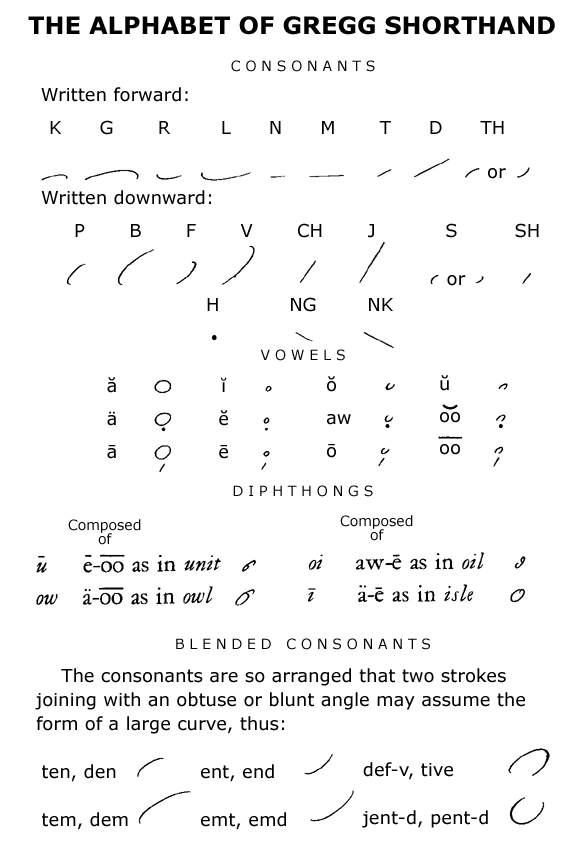
<style>
.page{position:relative;width:583px;height:857px;background:#ffffff}
.page>*{position:absolute;margin:0}
.t1{font:24px "Verdana-Bold";color:#000000}
.t2{font:14px/17px "Verdana";letter-spacing:0.35em;color:#000000}
.t3{font:18px "Verdana";color:#000000}
.t4{font:18px/33px "Verdana";color:#000000}
.t5{font:18px/32px "Verdana";color:#000000}
.t6{font:14px/14px "Verdana";color:#000000}
.t7{font:18px/24px "Verdana";color:#000000}
</style>
<div class="page">
<p class="t1" style="left:28px;top:16px;width:527px;height:19px">THE ALPHABET OF GREGG SHORTHAND</p>
<p class="t2" style="left:176px;top:60px;width:254px;height:590px;text-align:center">CONSONANTS<br><br><br><br><br><br><br><br><br><br><br><br><br><br><br><br><br>VOWELS<br><br><br><br><br><br><br><br>DIPHTHONGS<br><br><br><br><br><br><br><br><br>BLENDED CONSONANTS</p>
<p class="t3" style="left:41px;top:87px;width:147px;height:15px">Written forward:</p>
<p class="t3" style="left:50px;top:120px;width:454px;height:15px">K      G       R        L      N      M       T      D      TH</p>
<p class="t3" style="left:488px;top:168px;width:18px;height:11px">or</p>
<p class="t3" style="left:41px;top:190px;width:170px;height:15px">Written downward:</p>
<p class="t3" style="left:75px;top:223px;width:464px;height:15px">P       B       F       V       CH       J           S         SH</p>
<p class="t3" style="left:447px;top:275px;width:19px;height:11px">or</p>
<p class="t3" style="left:207px;top:297px;width:186px;height:15px">H           NG        NK</p>
<p class="t4" style="left:107px;top:377px;width:9px;height:82px">ă<br>ä<br>ā</p>
<p class="t4" style="left:219px;top:377px;width:9px;height:82px;text-align:center">ĭ<br>ĕ<br>ē</p>
<p class="t4" style="left:327px;top:376px;width:24px;height:82px">ŏ<br>aw<br>ō</p>
<p class="t5" style="left:440px;top:375px;width:20px;height:80px">ŭ<br>oo<br>oo</p>
<p class="t6" style="left:68px;top:519px;width:73px;height:26px;text-align:center">Composed<br>of</p>
<p class="t6" style="left:340px;top:515px;width:73px;height:26px;text-align:center">Composed<br>of</p>
<p class="t7" style="left:35px;top:668px;width:490px;height:66px">The consonants are so arranged that two strokes<br>joining with an obtuse or blunt angle may assume the<br>form of a large curve, thus:</p>
<p class="t7" style="left:42px;top:764px;width:86px;height:66px">ten, den<br><br>tem, dem</p>
<p class="t7" style="left:201px;top:764px;width:85px;height:66px">ent, end<br><br>emt, emd</p>
<p class="t7" style="left:362px;top:762px;width:126px;height:66px">def-v, tive<br><br>jent-d, pent-d</p>
</div>
